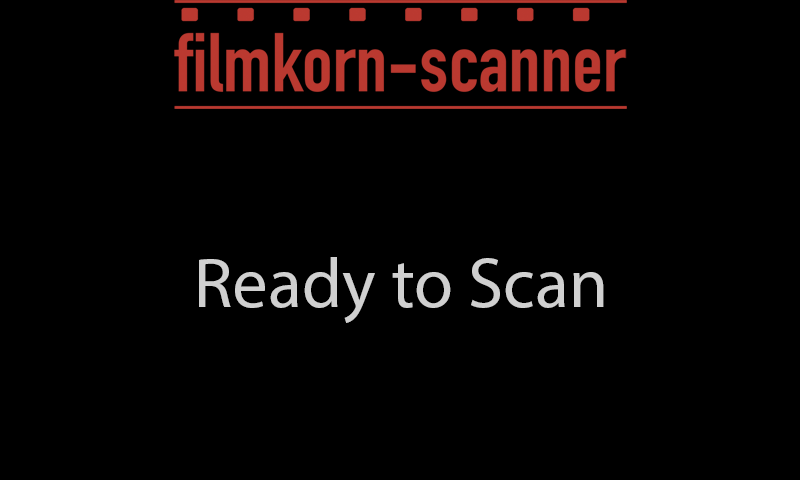
<style>
.page{position:relative;width:800px;height:480px;background:#000000}
.page>*{position:absolute;margin:0}
.t1{font:71px "MyriadPro-Regular";color:#d0d0d0}
</style>
<div class="page">
<p class="t1" style="left:199px;top:257px;width:405px;height:66px">Ready to Scan</p>
</div>
